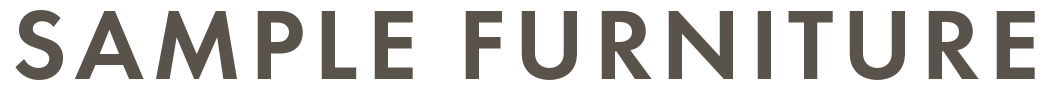
<style>
.page{position:relative;width:1050px;height:90px;background:#ffffff}
.page>*{position:absolute;margin:0}
.t1{font:102.7px "FuturaPT-Demi";letter-spacing:0.075em;color:#5a534b;text-transform:uppercase}
</style>
<div class="page">
<p class="t1" style="left:15px;top:10px;width:1020px;height:70px">Sample furniture</p>
</div>
